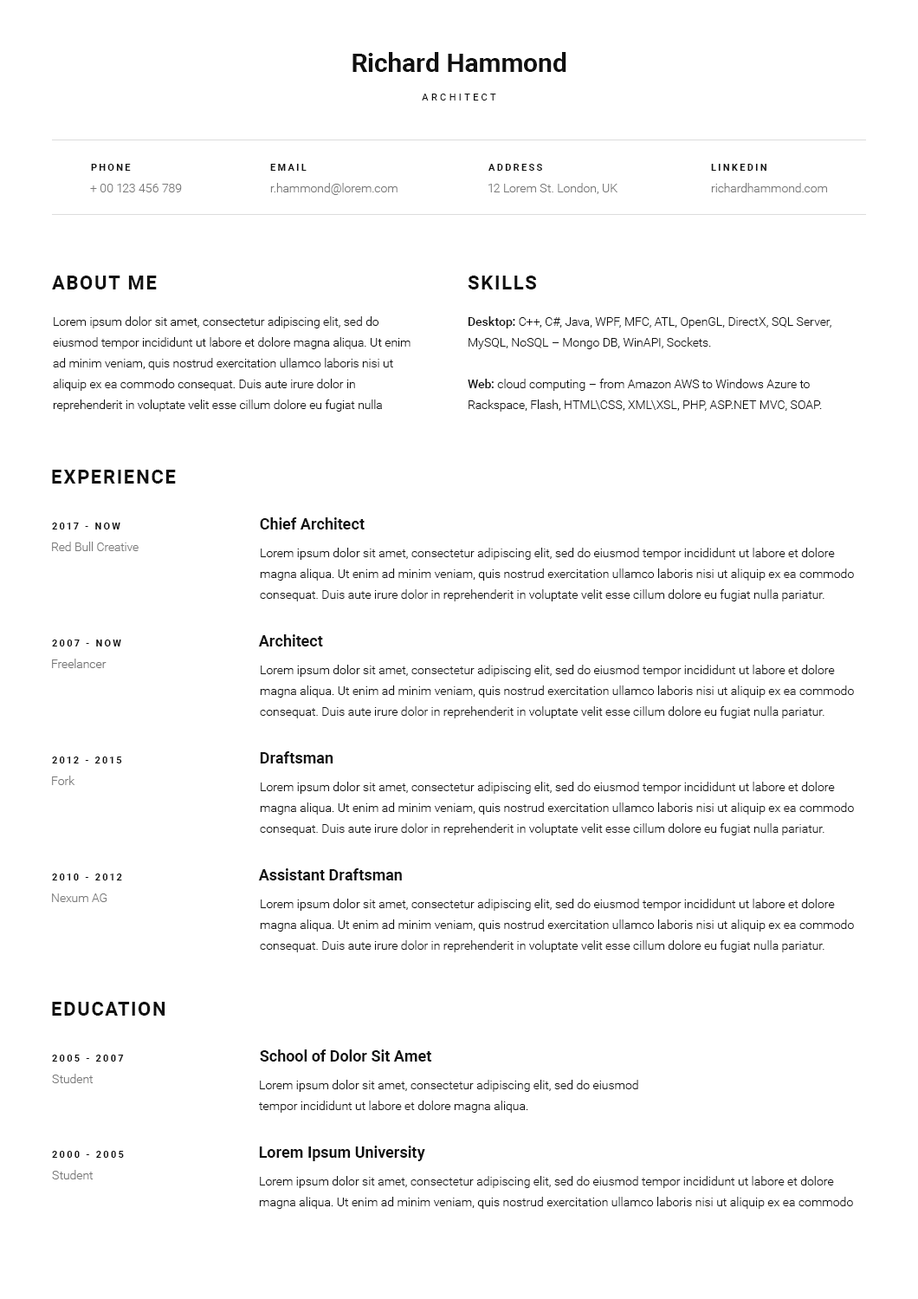
<style>
.page{position:relative;width:918px;height:1299px;background:#ffffff}
.page>*{position:absolute;margin:0}
.t1{font:26px "Roboto-Bold";color:#111111}
.t2{font:9.5px "Roboto-Regular";letter-spacing:0.3em;color:#111111;text-transform:uppercase}
.t3{font:9.5px "Roboto-Bold";letter-spacing:0.2em;color:#111111;text-transform:uppercase}
.t4{font:12.1px "Roboto-Light";color:#797979}
.t5{font:19.1px "Roboto-Bold";letter-spacing:0.075em;color:#111111;text-transform:uppercase}
.t6{font:12.1px/20.8px "Roboto-Light";color:#111111}
.t7{font:12.1px/20.8px "Roboto-Medium";color:#111111}
.t8{font:15.6px "Roboto-Bold";color:#111111}
.t9{font:12.1px "Roboto-Light";color:#737373}
</style>
<div class="page">
<p class="t1" style="left:353px;top:52px;width:214px;height:20px">Richard Hammond</p>
<p class="t2" style="left:422px;top:94px;width:74px;height:6px">Architect</p>
<p class="t3" style="left:91px;top:164px;width:40px;height:7px">phone</p>
<p class="t3" style="left:270px;top:164px;width:37px;height:7px">email</p>
<p class="t3" style="left:489px;top:164px;width:53px;height:7px">address</p>
<p class="t3" style="left:711px;top:164px;width:56px;height:7px">linkedin</p>
<p class="t4" style="left:90px;top:184px;width:92px;height:8px">+ 00 123 456 789</p>
<p class="t4" style="left:270px;top:183px;width:128px;height:12px">r.hammond@lorem.com</p>
<p class="t4" style="left:489px;top:183px;width:129px;height:11px">12 Lorem St. London, UK</p>
<p class="t4" style="left:711px;top:183px;width:116px;height:9px">richardhammond.com</p>
<p class="t5" style="left:52px;top:275px;width:105px;height:14px">about me</p>
<p class="t5" style="left:468px;top:275px;width:68px;height:14px">Skills</p>
<p class="t6" style="left:53px;top:316px;width:358px;height:95px">Lorem ipsum dolor sit amet, consectetur adipiscing elit, sed do eiusmod tempor incididunt ut labore et dolore magna aliqua. Ut enim ad minim veniam, quis nostrud exercitation ullamco laboris nisi ut aliquip ex ea commodo consequat. Duis aute irure dolor in reprehenderit in voluptate velit esse cillum dolore eu fugiat nulla pariatur.</p>
<p class="t6" style="left:468px;top:316px;width:364px;height:33px"><span class="t7">Desktop:</span> C++, C#, Java, WPF, MFC, ATL, OpenGL, DirectX, SQL Server, MySQL, NoSQL – Mongo DB, WinAPI, Sockets.</p>
<p class="t6" style="left:468px;top:379px;width:354px;height:32px"><span class="t7">Web: </span>cloud computing – from Amazon AWS to Windows Azure to Rackspace, Flash, HTML\CSS, XML\XSL, PHP, ASP.NET MVC, SOAP.</p>
<p class="t5" style="left:52px;top:470px;width:124px;height:13px">Experience</p>
<p class="t8" style="left:260px;top:517px;width:105px;height:12px">Сhief Architect</p>
<p class="t3" style="left:52px;top:522px;width:68px;height:7px">2017 - now</p>
<p class="t4" style="left:52px;top:541px;width:87px;height:10px">Red Bull Creative</p>
<p class="t6" style="left:260px;top:547px;width:594px;height:54px">Lorem ipsum dolor sit amet, consectetur adipiscing elit, sed do eiusmod tempor incididunt ut labore et dolore magna aliqua. Ut enim ad minim veniam, quis nostrud exercitation ullamco laboris nisi ut aliquip ex ea commodo consequat. Duis aute irure dolor in reprehenderit in voluptate velit esse cillum dolore eu fugiat nulla pariatur.</p>
<p class="t3" style="left:52px;top:639px;width:69px;height:7px">2007 - now</p>
<p class="t8" style="left:258px;top:634px;width:65px;height:12px">Architect</p>
<p class="t9" style="left:52px;top:658px;width:55px;height:10px">Freelancer</p>
<p class="t6" style="left:260px;top:664px;width:594px;height:54px">Lorem ipsum dolor sit amet, consectetur adipiscing elit, sed do eiusmod tempor incididunt ut labore et dolore magna aliqua. Ut enim ad minim veniam, quis nostrud exercitation ullamco laboris nisi ut aliquip ex ea commodo consequat. Duis aute irure dolor in reprehenderit in voluptate velit esse cillum dolore eu fugiat nulla pariatur.</p>
<p class="t3" style="left:52px;top:756px;width:70px;height:7px">2012 - 2015</p>
<p class="t8" style="left:260px;top:751px;width:74px;height:12px">Draftsman</p>
<p class="t4" style="left:52px;top:775px;width:23px;height:10px">Fork</p>
<p class="t6" style="left:260px;top:781px;width:594px;height:54px">Lorem ipsum dolor sit amet, consectetur adipiscing elit, sed do eiusmod tempor incididunt ut labore et dolore magna aliqua. Ut enim ad minim veniam, quis nostrud exercitation ullamco laboris nisi ut aliquip ex ea commodo consequat. Duis aute irure dolor in reprehenderit in voluptate velit esse cillum dolore eu fugiat nulla pariatur.</p>
<p class="t8" style="left:258px;top:868px;width:144px;height:12px">Assistant Draftsman</p>
<p class="t3" style="left:52px;top:873px;width:70px;height:7px">2010 - 2012</p>
<p class="t4" style="left:52px;top:893px;width:55px;height:9px">Nexum AG</p>
<p class="t6" style="left:260px;top:898px;width:594px;height:54px">Lorem ipsum dolor sit amet, consectetur adipiscing elit, sed do eiusmod tempor incididunt ut labore et dolore magna aliqua. Ut enim ad minim veniam, quis nostrud exercitation ullamco laboris nisi ut aliquip ex ea commodo consequat. Duis aute irure dolor in reprehenderit in voluptate velit esse cillum dolore eu fugiat nulla pariatur.</p>
<p class="t5" style="left:52px;top:1001px;width:113px;height:14px">Education</p>
<p class="t8" style="left:260px;top:1049px;width:171px;height:12px">School of Dolor Sit Amet</p>
<p class="t3" style="left:52px;top:1054px;width:72px;height:7px">2005 - 2007</p>
<p class="t4" style="left:52px;top:1073px;width:42px;height:10px">Student</p>
<p class="t6" style="left:259px;top:1079px;width:379px;height:33px">Lorem ipsum dolor sit amet, consectetur adipiscing elit, sed do eiusmod tempor incididunt ut labore et dolore magna aliqua.</p>
<p class="t8" style="left:259px;top:1145px;width:166px;height:16px">Lorem Ipsum University</p>
<p class="t3" style="left:52px;top:1150px;width:72px;height:7px">2000 - 2005</p>
<p class="t4" style="left:52px;top:1169px;width:42px;height:10px">Student</p>
<p class="t6" style="left:259px;top:1176px;width:594px;height:32px">Lorem ipsum dolor sit amet, consectetur adipiscing elit, sed do eiusmod tempor incididunt ut labore et dolore magna aliqua. Ut enim ad minim veniam, quis nostrud exercitation ullamco laboris nisi ut aliquip ex ea commodo consequat.</p>
</div>
